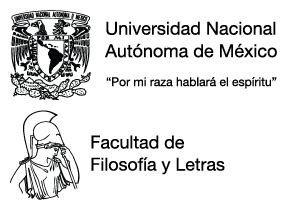
<style>
.page{position:relative;width:290px;height:210px;background:#ffffff}
.page>*{position:absolute;margin:0}
.t1{font:18px/22.5px "HelveticaNeue";color:#000000}
.t2{font:12.1px "HelveticaNeue";color:#000000}
.t3{font:17.8px/22.1px "HelveticaNeue";color:#000000}
</style>
<div class="page">
<p class="t1" style="left:105px;top:21px;width:172px;height:37px">Universidad Nacional<br>Autónoma de México</p>
<p class="t2" style="left:106px;top:77px;width:171px;height:12px">“Por mi raza hablará el espíritu”</p>
<p class="t3" style="left:91px;top:135px;width:134px;height:40px">Facultad de<br>Filosofía y Letras</p>
</div>
